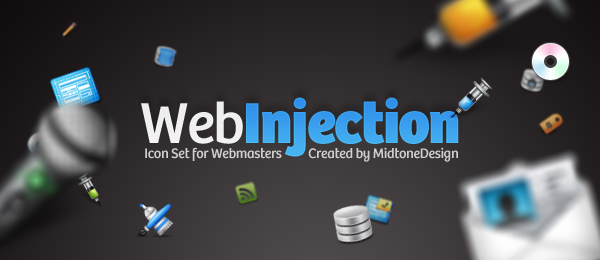
<style>
.page{position:relative;width:600px;height:260px}
.page>*{position:absolute;margin:0}
.t1{font:59.7px "Bree-ExtraBold";letter-spacing:-0.025em;color:#3ba1ee}
.t2{font:59.7px "Bree-Regular";letter-spacing:-0.025em;color:#f0f0f0}
.t3{font:14.3px "Bree-Regular";letter-spacing:-0.025em;color:#cecece}
</style>
<div class="page">
<p class="t1" style="left:141px;top:97px;width:318px;height:60px"><span class="t2">Web</span>Injection</p>
<p class="t3" style="left:145px;top:147px;width:313px;height:15px">Icon Set for Webmasters          Created by MidtoneDesign</p>
</div>
